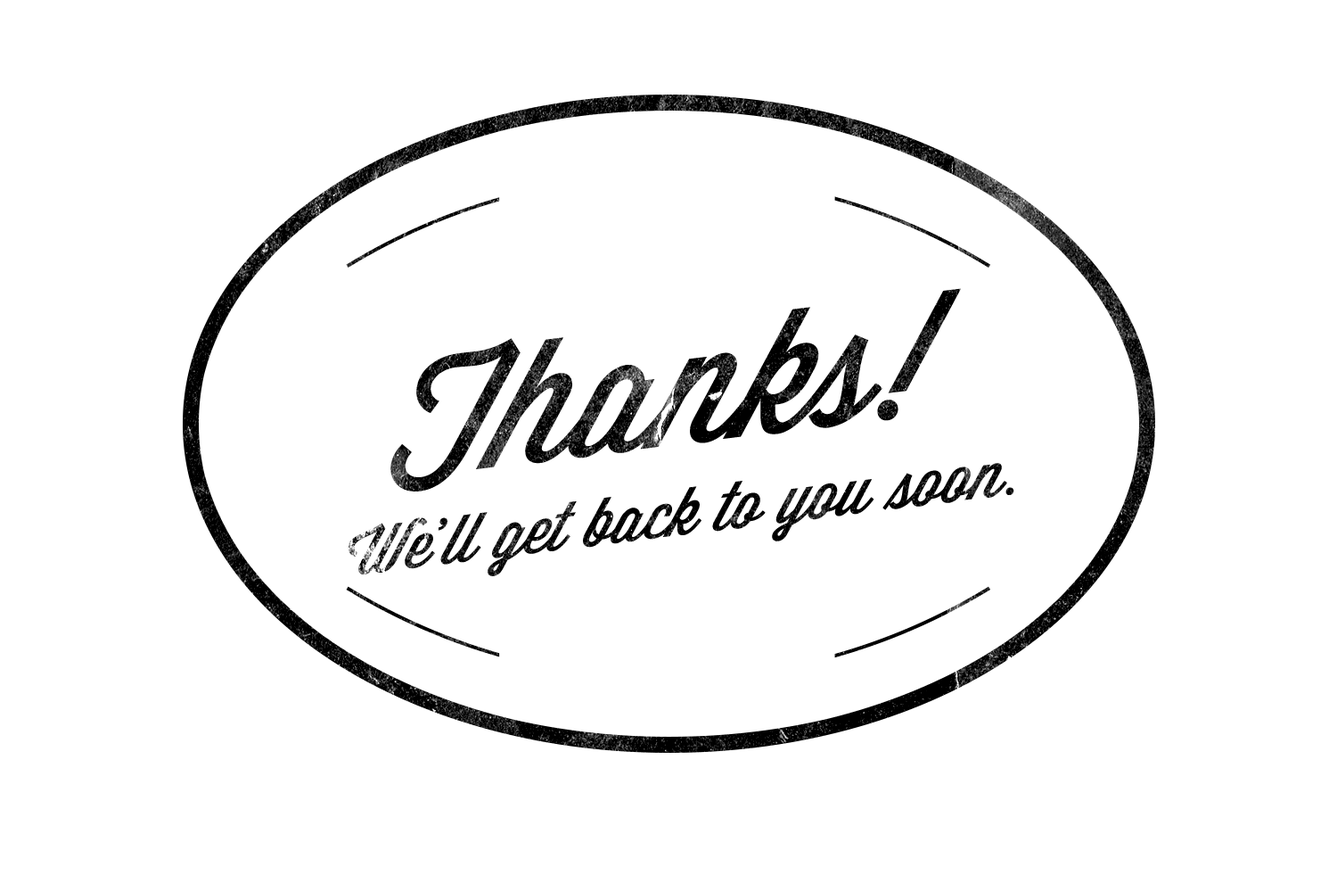
<style>
.page{position:relative;width:1337px;height:892px;background:#ffffff}
.page>*{position:absolute;margin:0}
.t1{font:167.8px "Wisdom-Script"}
.t2{font:64.2px "Wisdom-Script";color:#000000}
</style>
<div class="page">
<p class="t1" style="left:391px;top:288px;width:570px;height:203px;rotate:-7deg">Thanks!</p>
<p class="t2" style="left:348px;top:463px;width:667px;height:113px;rotate:-7deg">We’ll get back to you soon.</p>
</div>
